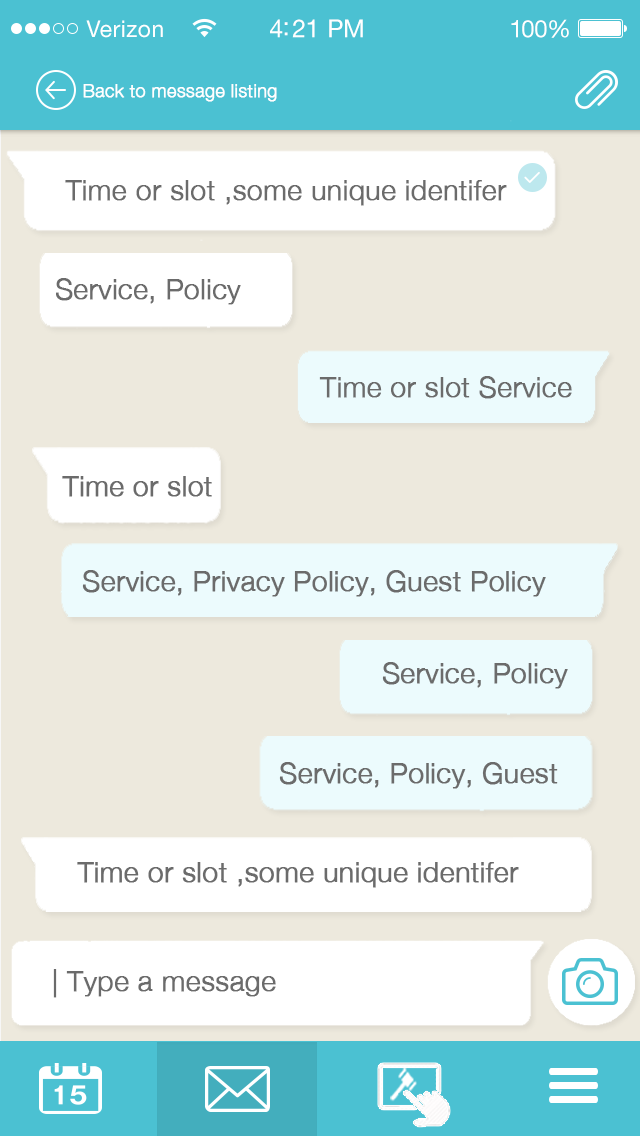
<style>
.page{position:relative;width:640px;height:1136px;background:#ede9dd}
.page>*{position:absolute;margin:0}
.t1{font:23px "HelveticaNeueLTStd-Roman";letter-spacing:0.02em;color:#ffffff}
.t2{font:25px "HelveticaNeueLTStd-Roman";letter-spacing:-0.02em;color:#ffffff}
.t3{font:24px "HelveticaNeueLTStd-Roman";letter-spacing:-0.02em;color:#ffffff}
.t4{font:18px "HelveticaNeue-Light";color:#ffffff;font-weight:bold}
.t5{font:28px "HelveticaNeue-Light";color:#6b6b6b;font-weight:bold}
</style>
<div class="page">
<p class="t1" style="left:86px;top:20px;width:77px;height:18px">Verizon</p>
<p class="t2" style="left:270px;top:19px;width:93px;height:19px">4:21 PM</p>
<p class="t3" style="left:511px;top:19px;width:58px;height:19px">100%</p>
<p class="t4" style="left:83px;top:84px;width:194px;height:18px">Back to message listing</p>
<p class="t5" style="left:65px;top:180px;width:442px;height:26px">Time or slot ,some unique identifer</p>
<p class="t5" style="left:56px;top:278px;width:185px;height:27px">Service, Policy</p>
<p class="t5" style="left:319px;top:376px;width:253px;height:23px">Time or slot Service</p>
<p class="t5" style="left:62px;top:476px;width:150px;height:21px">Time or slot</p>
<p class="t5" style="left:82px;top:570px;width:464px;height:27px">Service, Privacy Policy, Guest Policy</p>
<p class="t5" style="left:382px;top:662px;width:186px;height:27px">Service, Policy</p>
<p class="t5" style="left:279px;top:762px;width:279px;height:27px">Service, Policy, Guest</p>
<p class="t5" style="left:77px;top:862px;width:442px;height:26px">Time or slot ,some unique identifer</p>
<p class="t5" style="left:53px;top:969px;width:223px;height:29px">| Type a message</p>
</div>
